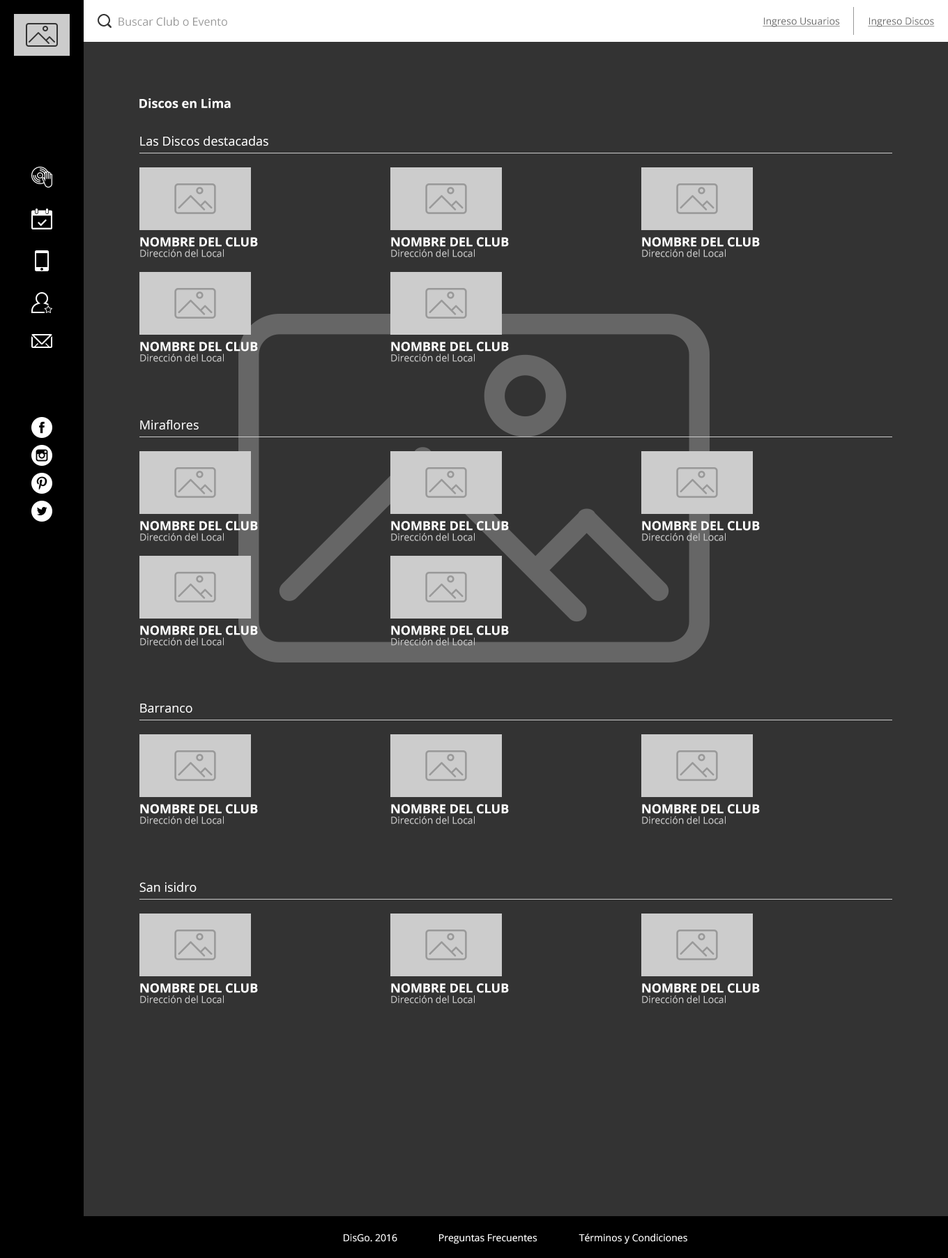
<style>
.page{position:relative;width:948px;height:1258px;background:#333333}
.page>*{position:absolute;margin:0}
.t1{font:11.2px "OpenSans";color:#999999}
.t2{font:9.8px "OpenSans";color:#666666;text-decoration:underline}
.t3{font:12.5px "OpenSans-Bold";color:#ffffff}
.t4{font:12.5px "OpenSans";color:#ffffff}
.t5{font:12.5px "OpenSans-Bold";color:#ffffff;text-transform:uppercase}
.t6{font:9.8px "OpenSans";color:#cccccc}
.t7{font:9.8px "OpenSans";color:#ffffff}
</style>
<div class="page">
<p class="t1" style="left:119px;top:17px;width:108px;height:9px">Buscar Club o Evento</p>
<p class="t2" style="left:763px;top:17px;width:77px;height:10px">Ingreso Usuarios</p>
<p class="t2" style="left:868px;top:17px;width:67px;height:10px">Ingreso Discos</p>
<p class="t3" style="left:139px;top:98px;width:92px;height:10px">Discos en Lima</p>
<p class="t4" style="left:140px;top:136px;width:128px;height:10px">Las Discos destacadas</p>
<p class="t5" style="left:140px;top:237px;width:118px;height:10px">Nombre del club</p>
<p class="t5" style="left:391px;top:237px;width:118px;height:10px">Nombre del club</p>
<p class="t5" style="left:642px;top:237px;width:118px;height:10px">Nombre del club</p>
<p class="t6" style="left:140px;top:249px;width:84px;height:8px">Dirección del Local</p>
<p class="t6" style="left:391px;top:249px;width:84px;height:8px">Dirección del Local</p>
<p class="t6" style="left:642px;top:249px;width:84px;height:8px">Dirección del Local</p>
<p class="t5" style="left:140px;top:342px;width:118px;height:9px">Nombre del club</p>
<p class="t5" style="left:391px;top:342px;width:118px;height:9px">Nombre del club</p>
<p class="t6" style="left:140px;top:353px;width:84px;height:9px">Dirección del Local</p>
<p class="t6" style="left:391px;top:353px;width:84px;height:9px">Dirección del Local</p>
<p class="t4" style="left:140px;top:420px;width:59px;height:9px">Miraflores</p>
<p class="t5" style="left:140px;top:521px;width:118px;height:10px">Nombre del club</p>
<p class="t5" style="left:391px;top:521px;width:118px;height:10px">Nombre del club</p>
<p class="t5" style="left:642px;top:521px;width:118px;height:10px">Nombre del club</p>
<p class="t6" style="left:140px;top:533px;width:84px;height:8px">Dirección del Local</p>
<p class="t6" style="left:391px;top:533px;width:84px;height:8px">Dirección del Local</p>
<p class="t6" style="left:642px;top:533px;width:84px;height:8px">Dirección del Local</p>
<p class="t5" style="left:140px;top:625px;width:118px;height:10px">Nombre del club</p>
<p class="t5" style="left:391px;top:625px;width:118px;height:10px">Nombre del club</p>
<p class="t6" style="left:140px;top:637px;width:84px;height:9px">Dirección del Local</p>
<p class="t6" style="left:391px;top:637px;width:84px;height:9px">Dirección del Local</p>
<p class="t4" style="left:140px;top:703px;width:52px;height:9px">Barranco</p>
<p class="t5" style="left:140px;top:804px;width:118px;height:10px">Nombre del club</p>
<p class="t5" style="left:391px;top:804px;width:118px;height:10px">Nombre del club</p>
<p class="t5" style="left:642px;top:804px;width:118px;height:10px">Nombre del club</p>
<p class="t6" style="left:140px;top:816px;width:84px;height:8px">Dirección del Local</p>
<p class="t6" style="left:391px;top:816px;width:84px;height:8px">Dirección del Local</p>
<p class="t6" style="left:642px;top:816px;width:84px;height:8px">Dirección del Local</p>
<p class="t4" style="left:139px;top:882px;width:58px;height:10px">San isidro</p>
<p class="t5" style="left:140px;top:983px;width:118px;height:10px">Nombre del club</p>
<p class="t5" style="left:391px;top:983px;width:118px;height:10px">Nombre del club</p>
<p class="t5" style="left:642px;top:983px;width:118px;height:10px">Nombre del club</p>
<p class="t6" style="left:140px;top:995px;width:84px;height:8px">Dirección del Local</p>
<p class="t6" style="left:391px;top:995px;width:84px;height:8px">Dirección del Local</p>
<p class="t6" style="left:642px;top:995px;width:84px;height:8px">Dirección del Local</p>
<p class="t7" style="left:344px;top:1233px;width:53px;height:9px">DisGo. 2016</p>
<p class="t7" style="left:439px;top:1234px;width:98px;height:10px">Preguntas Frecuentes</p>
<p class="t7" style="left:579px;top:1233px;width:108px;height:11px">Términos y Condiciones</p>
</div>
